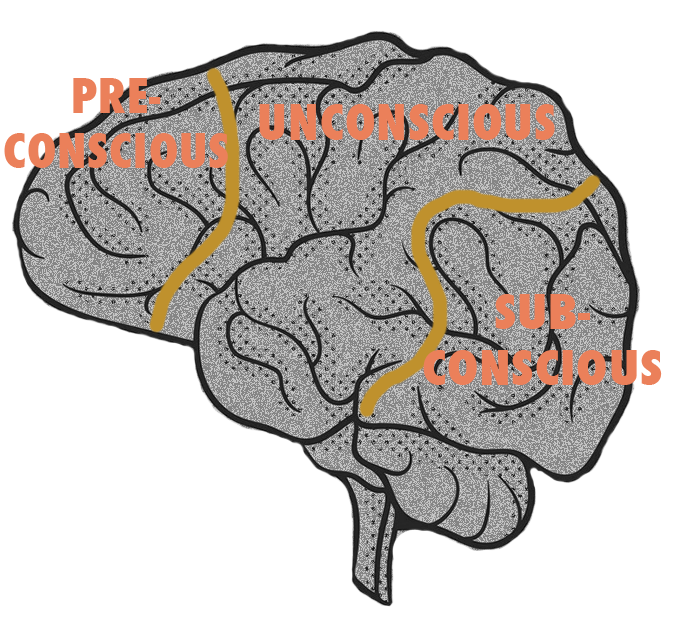
<style>
.page{position:relative;width:677px;height:623px;background:#ffffff}
.page>*{position:absolute;margin:0}
.t1{font:46px "Futura-CondensedExtraBold";letter-spacing:0.02em;color:#eb805a}
.t2{font:48px "Futura-CondensedExtraBold";letter-spacing:0.02em;color:#eb805a}
.t3{font:47px "Futura-CondensedExtraBold";letter-spacing:0.02em;color:#eb805a;scale:1.04 1}
</style>
<div class="page">
<p class="t1" style="left:4px;top:78px;width:224px;height:90px;text-align:center">PRE-<br>CONSCIOUS</p>
<p class="t2" style="left:259px;top:104px;width:296px;height:36px">UNCONSCIOUS</p>
<p class="t3" style="left:423px;top:294px;width:239px;height:91px;text-align:center">SUB-<br>CONSCIOUS</p>
</div>
